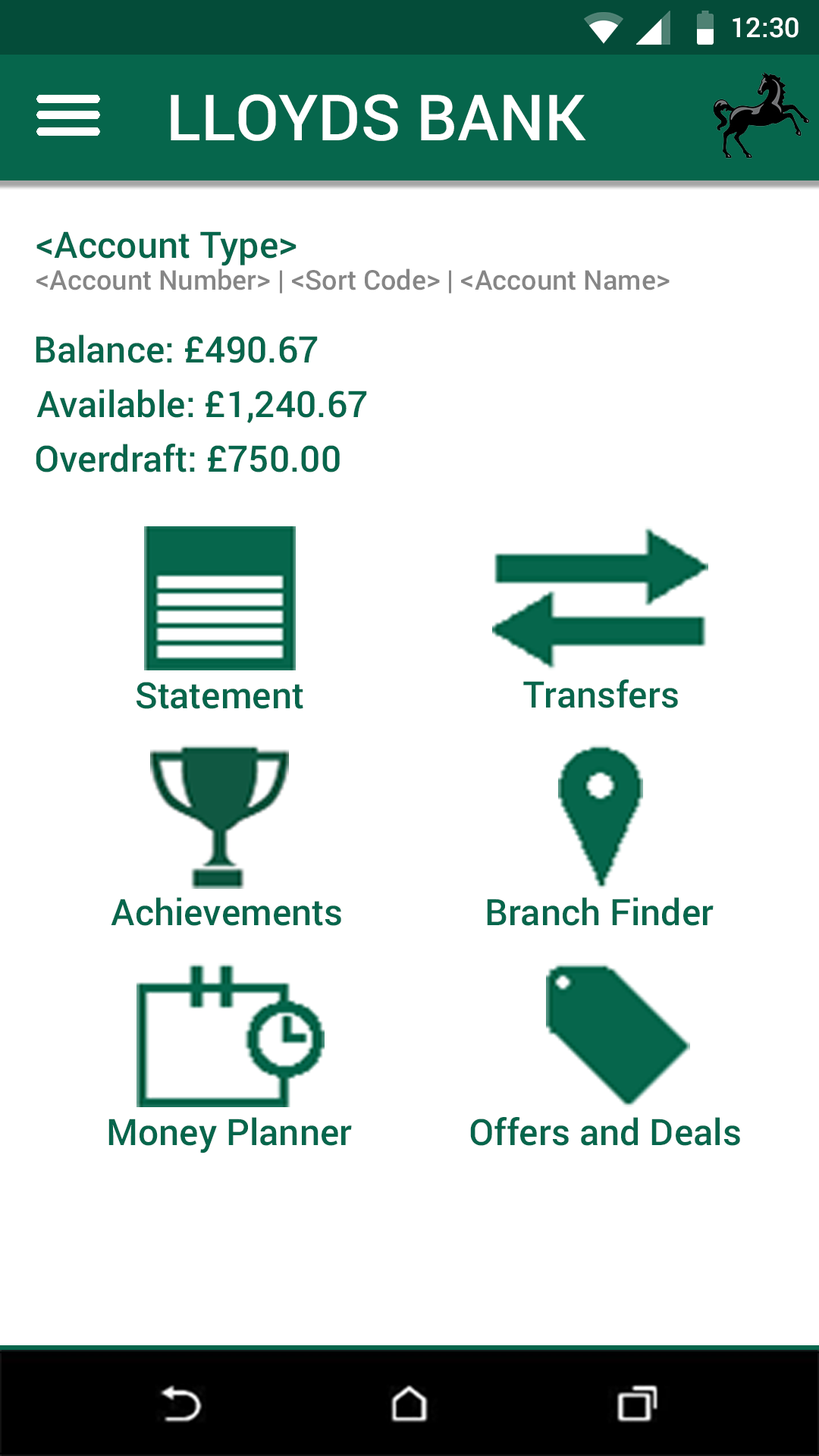
<style>
.page{position:relative;width:819px;height:1456px;background:#ffffff}
.page>*{position:absolute;margin:0}
.t1{font:27.3px "Roboto-Medium";color:#ffffff}
.t2{font:63.7px "Roboto-Medium";color:#ffffff}
.t3{font:36.4px "Roboto-Medium";color:#06664c}
.t4{font:27.3px "Roboto-Medium";color:#868686}
</style>
<div class="page">
<p class="t1" style="left:733px;top:17px;width:66px;height:21px">12:30</p>
<p class="t2" style="left:171px;top:94px;width:415px;height:47px">LLOYDS BANK</p>
<p class="t3" style="left:36px;top:231px;width:261px;height:35px">&lt;Account Type&gt;</p>
<p class="t4" style="left:36px;top:268px;width:634px;height:25px">&lt;Account Number&gt; | &lt;Sort Code&gt; | &lt;Account Name&gt;</p>
<p class="t3" style="left:36px;top:334px;width:282px;height:29px">Balance: £490.67</p>
<p class="t3" style="left:36px;top:389px;width:331px;height:34px">Available: £1,240.67</p>
<p class="t3" style="left:36px;top:444px;width:304px;height:28px">Overdraft: £750.00</p>
<p class="t3" style="left:136px;top:682px;width:167px;height:27px">Statement</p>
<p class="t3" style="left:523px;top:679px;width:155px;height:29px">Transfers</p>
<p class="t3" style="left:111px;top:897px;width:230px;height:29px">Achievements</p>
<p class="t3" style="left:487px;top:897px;width:227px;height:29px">Branch Finder</p>
<p class="t3" style="left:108px;top:1117px;width:244px;height:36px">Money Planner</p>
<p class="t3" style="left:470px;top:1117px;width:270px;height:29px">Offers and Deals</p>
</div>
